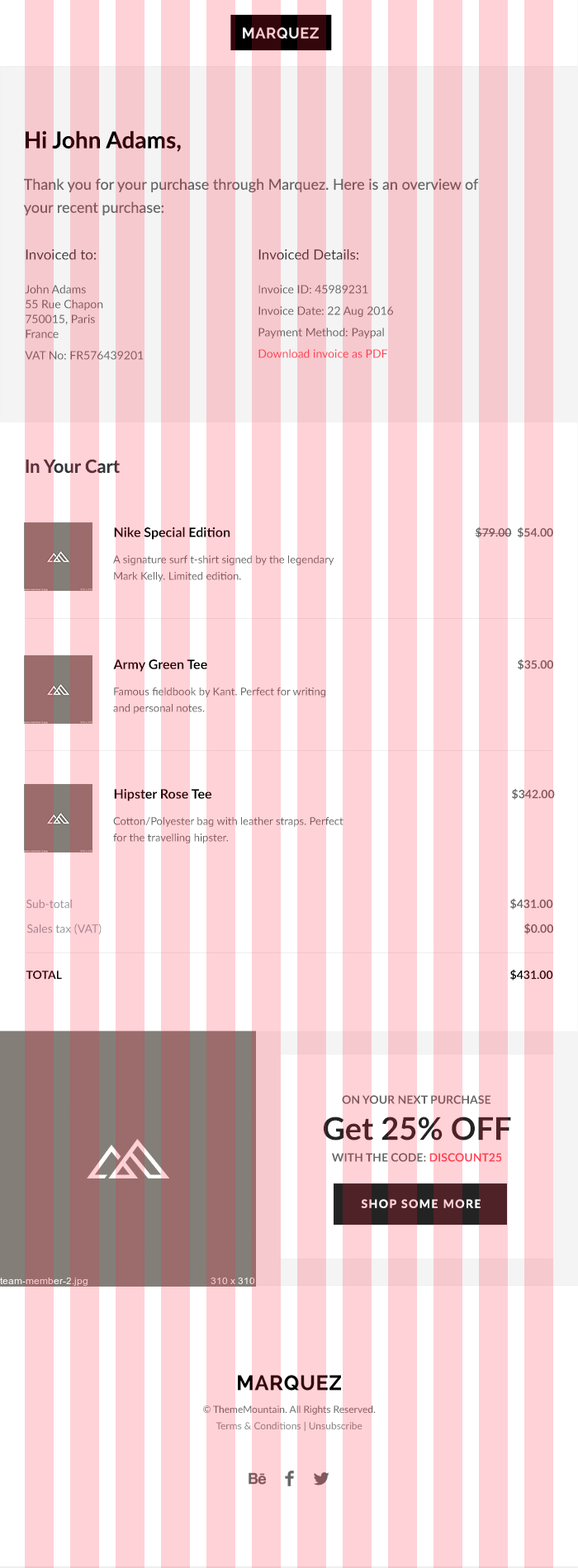
<style>
.page{position:relative;width:578px;height:1568px;background:#ffd2d7}
.page>*{position:absolute;margin:0}
.t1{font:23.1px "Lato-Bold";color:#33060b}
.t2{font:14.9px/23.1px "Lato-Regular"}
.t3{font:11.6px/14.9px "Lato-Regular"}
.t4{font:14px/19px "Lato-Regular"}
.t5{font:11.6px/21.5px "Lato-Regular"}
.t6{font:18.2px "Lato-Bold"}
.t7{font:13.2px "Lato-Bold"}
.t8{font:11.6px "Lato-Bold";color:#85585d}
.t9{font:10.7px/16.5px "Lato-Regular"}
.t10{font:10.7px/16.5px "Lato-Regular";color:#85585d}
.t11{font:11.6px "Lato-Bold"}
.t12{font:11.6px "Lato-Regular"}
.t13{font:11.6px "Lato-Bold";color:#33060b}
.t14{font:31.4px "Lato-Bold"}
.t15{font:11.6px "Lato-Bold";color:#666666}
.t16{font:11.6px "Lato-Bold";color:#ff4556}
.t17{font:11.6px "Lato-Bold";letter-spacing:0.1em}
.t18{font:9.9px/16.5px "Lato-Regular";color:#666666}
.t19{font:9.9px/16.5px "Lato-Regular";color:#888888}
</style>
<div class="page">
<p class="t1" style="left:26px;top:130px;width:155px;height:22px">Hi John Adams,</p>
<p class="t2" style="left:23px;top:178px;width:456px;height:37px">Thank you for your purchase through Marquez. Here is an overview of your recent purchase:</p>
<p class="t3" style="left:25px;top:249px;width:119px;height:111px"><span class="t4">Invoiced to:<br><br></span>John Adams<br>55 Rue Chapon<br>750015, Paris<br>France<span class="t5"><br>VAT No: FR576439201</span></p>
<p class="t5" style="left:258px;top:249px;width:135px;height:109px"><span class="t4">Invoiced Details:<br><br></span><span class="t3">I</span><span class="t3">nvoice ID: 45989231<br></span>Invoice Date: 22 Aug 2016<br>Payment Method: Paypal<br>Download invoice as PDF</p>
<p class="t6" style="left:26px;top:459px;width:94px;height:15px">In Your Cart</p>
<p class="t7" style="left:114px;top:527px;width:116px;height:13px">Nike Special Edition</p>
<p class="t8" style="left:475px;top:527px;width:78px;height:11px">$79.00  $54.00</p>
<p class="t9" style="left:113px;top:555px;width:221px;height:27px;text-align:justify">A signature surf t-shirt signed by the legendary<br>Mark Kelly. Limited edition.</p>
<p class="t7" style="left:113px;top:659px;width:94px;height:13px">Army Green Tee</p>
<p class="t8" style="left:517px;top:659px;width:36px;height:11px">$35.00</p>
<p class="t10" style="left:113px;top:687px;width:212px;height:27px;text-align:justify">Famous fieldbook by Kant. Perfect for writing<br>and personal notes.</p>
<p class="t7" style="left:114px;top:789px;width:97px;height:12px">Hipster Rose Tee</p>
<p class="t11" style="left:512px;top:788px;width:43px;height:12px">$342.00</p>
<p class="t9" style="left:113px;top:817px;width:230px;height:26px;text-align:justify">Cotton/Polyester bag with leather straps. Perfect<br>for the travelling hipster.</p>
<p class="t12" style="left:26px;top:900px;width:46px;height:9px">Sub-total</p>
<p class="t11" style="left:510px;top:898px;width:43px;height:11px">$431.00</p>
<p class="t12" style="left:27px;top:923px;width:75px;height:12px">Sales tax (VAT)</p>
<p class="t8" style="left:524px;top:923px;width:29px;height:11px">$0.00</p>
<p class="t13" style="left:26px;top:971px;width:36px;height:9px">TOTAL</p>
<p class="t11" style="left:510px;top:969px;width:43px;height:11px">$431.00</p>
<p class="t11" style="left:342px;top:1095px;width:148px;height:9px">ON YOUR NEXT PURCHASE</p>
<p class="t14" style="left:324px;top:1117px;width:187px;height:24px">Get 25% OFF</p>
<p class="t15" style="left:331px;top:1153px;width:171px;height:9px">WITH THE CODE: <span class="t16">DISCOUNT25</span></p>
<p class="t17" style="left:361px;top:1199px;width:119px;height:9px">SHOP SOME MORE</p>
<p class="t18" style="left:203px;top:1405px;width:172px;height:26px;text-align:center">© ThemeMountain. All Rights Reserved. <br><span class="t19">Terms &amp; Conditions | Unsubscribe</span></p>
</div>
